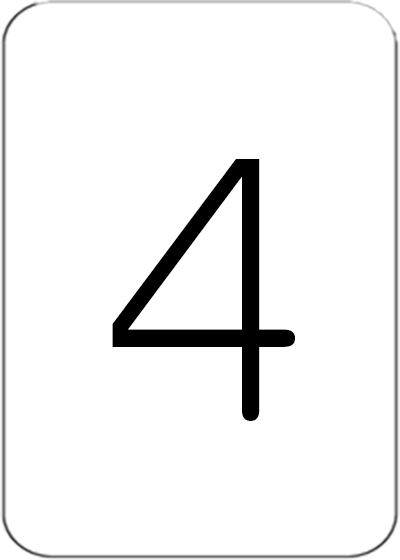
<style>
.page{position:relative;width:400px;height:560px;background:#ffffff}
.page>*{position:absolute;margin:0}
.t1{font:416.7px "JuraLight";color:#000000}
</style>
<div class="page">
<p class="t1" style="left:112px;top:159px;width:183px;height:262px">4</p>
</div>
